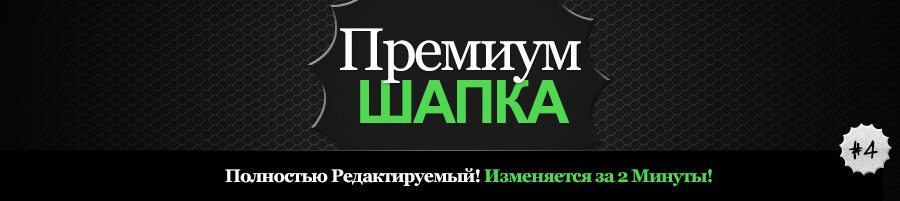
<style>
.page{position:relative;width:900px;height:201px;background:#000000}
.page>*{position:absolute;margin:0}
.t1{font:60px "Georgia";letter-spacing:-0.05em;color:#ffffff}
.t2{font:60px "Arial-BoldMT";letter-spacing:-0.05em;color:#4fd850;text-transform:uppercase}
.t3{font:30px "tomshandwrittennew";color:#020708;text-transform:uppercase}
.t4{font:18px "Georgia-Bold";letter-spacing:-0.05em;color:#fdfcfc}
.t5{font:18px "Georgia-Bold";letter-spacing:-0.05em;color:#4fd850}
</style>
<div class="page">
<p class="t1" style="left:340px;top:28px;width:241px;height:55px">Премиум</p>
<p class="t2" style="left:360px;top:80px;width:210px;height:43px">ШАПКА</p>
<p class="t3" style="left:849px;top:140px;width:29px;height:20px">#4</p>
<p class="t4" style="left:225px;top:168px;width:487px;height:18px">Полностью Редактируемый! <span class="t5">Изменяется за 2 Минуты!</span></p>
</div>
